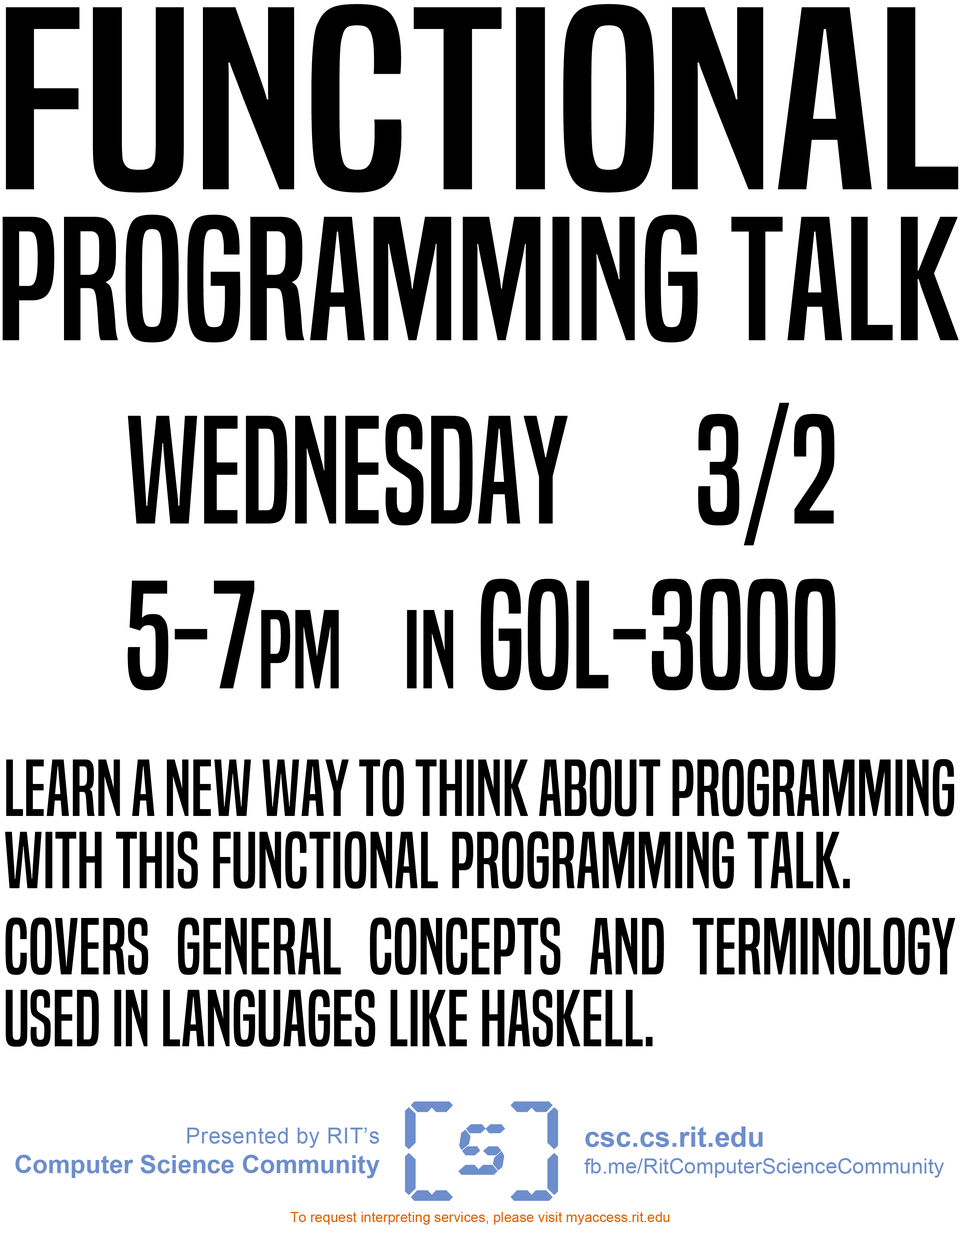
<style>
.page{position:relative;width:960px;height:1242px;background:#ffffff}
.page>*{position:absolute;margin:0}
.t1{font:162.9px/150.7px "BuiltTitlingRg-Regular";color:#000000;scale:1.14 1}
.t2{font:240.4px/150.7px "BuiltTitlingRg-Regular";color:#000000;scale:1.32 1}
.t3{font:142.3px/165.1px "BuiltTitlingRg-Regular";color:#000000}
.t4{font:103.7px/165.1px "BuiltTitlingRg-Regular";color:#000000}
.t5{font:75px/72.1px "BuiltTitlingRg-Regular";color:#000000}
.t6{font:25.1px/29.8px "Arial-BoldMT";color:#6d8ecc}
.t7{font:22px/29.8px "ArialMT";letter-spacing:0.02em;color:#6d8ecc}
.t8{font:21.2px/26.7px "ArialMT";color:#6d8ecc}
.t9{font:28.2px/26.7px "Arial-BoldMT";color:#6d8ecc}
.t10{font:13.9px "ArialMT";color:#de6100}
</style>
<div class="page">
<p class="t1" style="left:3px;top:4px;width:955px;height:339px;text-align:center"><span class="t2">functional<br></span>programming talk</p>
<p class="t3" style="left:128px;top:403px;width:708px;height:287px;text-align:center">Wednesday      3/2<br>5-7<span class="t4">pm    in</span> gol-3000</p>
<p class="t5" style="left:5px;top:759px;width:950px;height:288px;text-align:justify">Learn a new way to think about programming with this Functional Programming talk. <br><br>Covers general concepts and terminology used in languages like Haskell.</p>
<p class="t6" style="left:15px;top:1128px;width:365px;height:51px;text-align:right"><span class="t7">Presented by RIT’s<br></span>Computer Science Community</p>
<p class="t8" style="left:584px;top:1127px;width:360px;height:51px"><span class="t9">csc.cs.rit.edu<br></span>fb.me/RitComputerScienceCommunity</p>
<p class="t10" style="left:290px;top:1212px;width:379px;height:13px">To request interpreting services, please visit myaccess.rit.edu</p>
</div>
